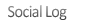
<style>
.page{position:relative;width:90px;height:23px;background:#ffffff}
.page>*{position:absolute;margin:0}
.t1{font:17.3px "Calibri";letter-spacing:-0.04em;scale:0.94 1}
</style>
<div class="page">
<p class="t1" style="left:8px;top:5px;width:59px;height:15px">Social Log</p>
</div>
